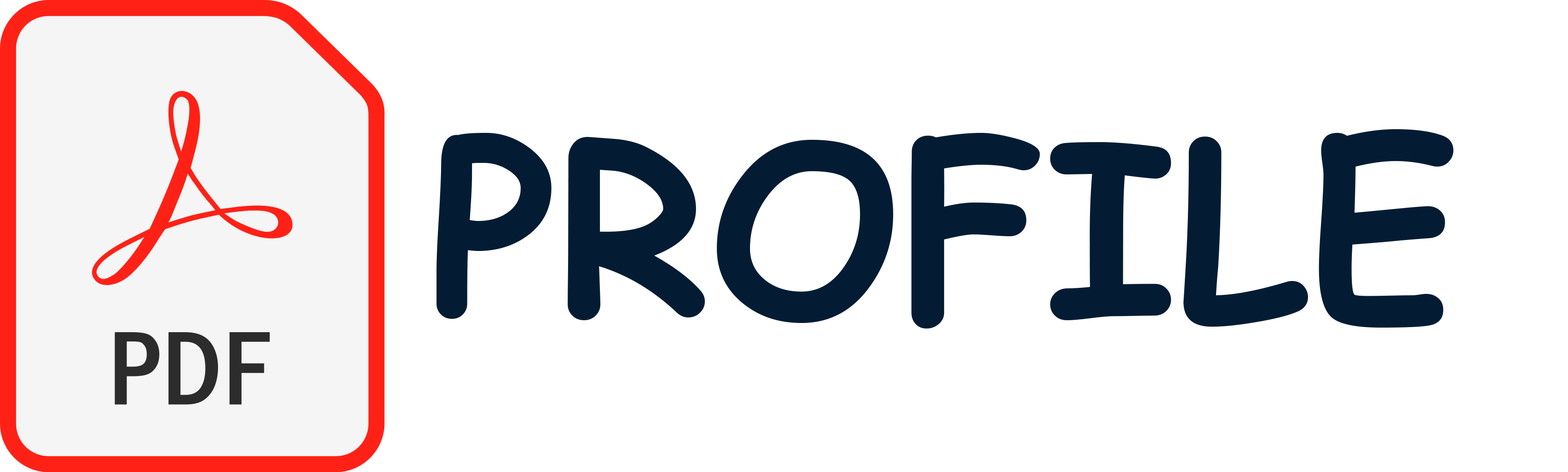
<style>
.page{position:relative;width:1568px;height:472px;background:#ffffff}
.page>*{position:absolute;margin:0}
.t1{font:239px "ComicSansMS-Bold";color:#031c33}
</style>
<div class="page">
<p class="t1" style="left:436px;top:129px;width:1017px;height:200px">PROFILE</p>
</div>
